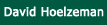
<style>
.page{position:relative;width:107px;height:25px;background:#005941}
.page>*{position:absolute;margin:0}
.t1{font:12px "Tahoma";letter-spacing:0.02em;color:#ffffff;font-weight:bold}
</style>
<div class="page">
<p class="t1" style="left:4px;top:6px;width:100px;height:11px">David Hoelzeman</p>
</div>
